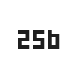
<style>
.page{position:relative;width:74px;height:74px;background:#ffffff}
.page>*{position:absolute;margin:0}
.t1{font:30px "04b24";color:#1f1f1f}
</style>
<div class="page">
<p class="t1" style="left:18px;top:30px;width:42px;height:19px">256</p>
</div>
